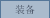
<style>
.page{position:relative;width:50px;height:18px;background:#aabbcc}
.page>*{position:absolute;margin:0}
.t1{font:10px "SimSun"}
</style>
<div class="page">
<p class="t1" style="left:15px;top:4px;width:20px;height:10px">装备</p>
</div>
